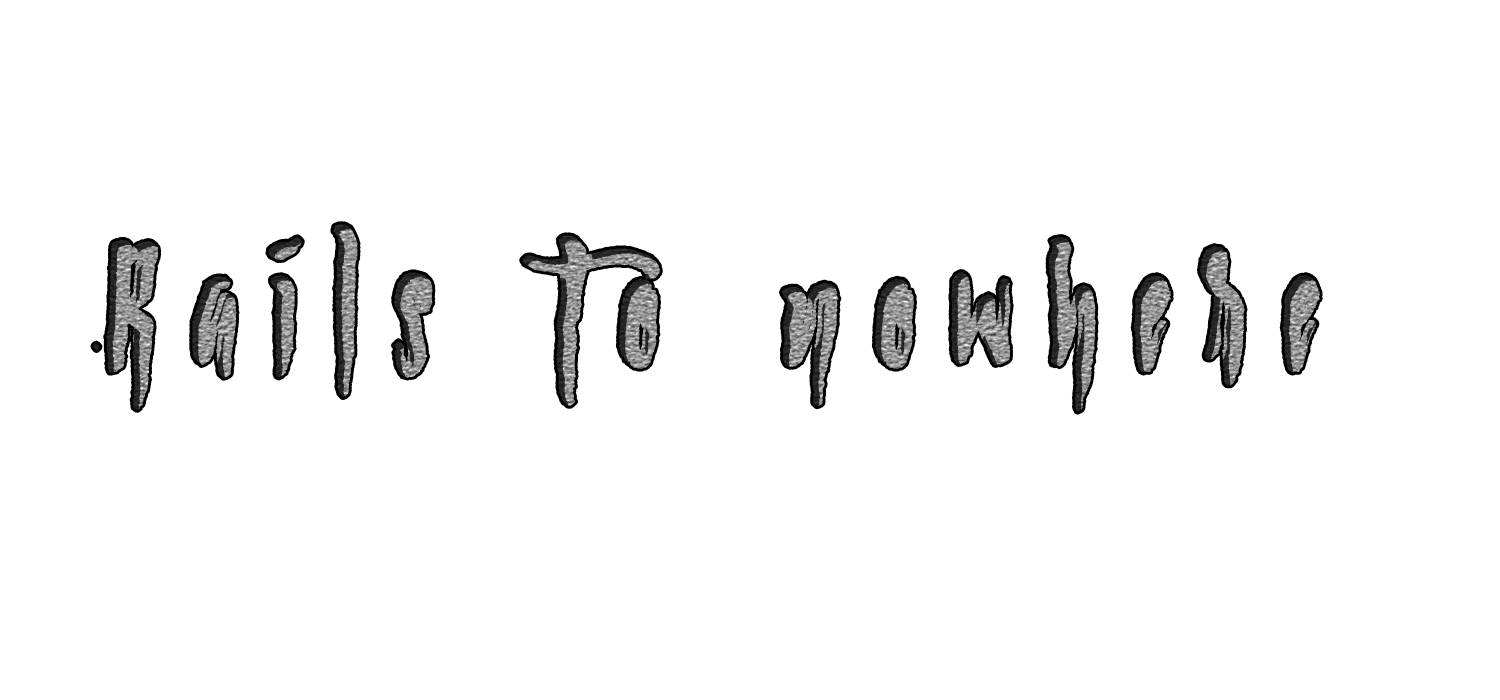
<style>
.page{position:relative;width:1500px;height:700px;background:#ffffff}
.page>*{position:absolute;margin:0}
.t1{font:200px "Strained";letter-spacing:0.2em;font-weight:bold;scale:0.9 1}
</style>
<div class="page">
<p class="t1" style="left:93px;top:224px;width:1227px;height:188px">Rails to nowhere</p>
</div>
